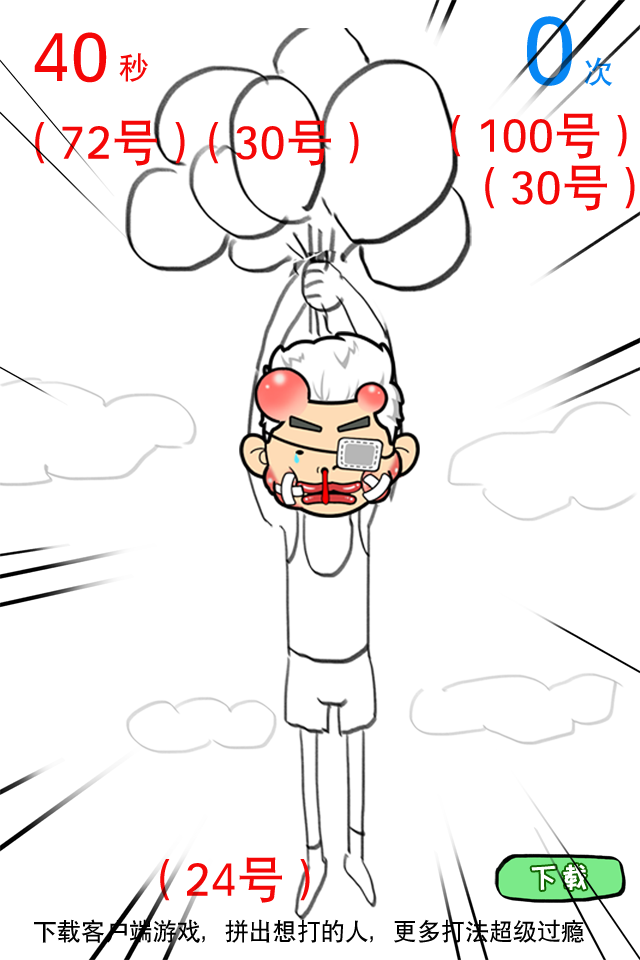
<style>
.page{position:relative;width:640px;height:960px;background:#ffffff}
.page>*{position:absolute;margin:0}
.t1{font:100px "SIL-Hei-Med-Jian";color:#0787f4}
.t2{font:72px "SIL-Hei-Med-Jian";color:#f40707}
.t3{font:30px "SIL-Hei-Med-Jian";color:#f40707}
.t4{font:30px "SIL-Hei-Med-Jian";color:#0787f4}
.t5{font:48.4px "SIL-Hei-Med-Jian";color:#f40707}
.t6{font:30px "FZKATJW--GB1-0";color:#ffffff;font-weight:bold}
.t7{font:24px "SIL-Hei-Med-Jian";color:#000000}
</style>
<div class="page">
<p class="t1" style="left:527px;top:16px;width:45px;height:70px">0</p>
<p class="t2" style="left:34px;top:32px;width:73px;height:51px">40</p>
<p class="t3" style="left:119px;top:53px;width:29px;height:29px">秒</p>
<p class="t4" style="left:584px;top:57px;width:29px;height:29px">次</p>
<p class="t5" style="left:451px;top:113px;width:176px;height:46px">（100号）</p>
<p class="t5" style="left:35px;top:120px;width:150px;height:46px">（72号）</p>
<p class="t5" style="left:209px;top:120px;width:150px;height:46px">（30号）</p>
<p class="t5" style="left:485px;top:165px;width:150px;height:46px">（30号）</p>
<p class="t5" style="left:160px;top:857px;width:150px;height:46px">（24号）</p>
<p class="t6" style="left:531px;top:864px;width:56px;height:26px">下载</p>
<p class="t7" style="left:34px;top:919px;width:550px;height:24px">下载客户端游戏，拼出想打的人，更多打法超级过瘾</p>
</div>
